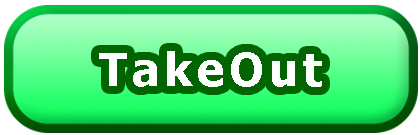
<style>
.page{position:relative;width:420px;height:135px}
.page>*{position:absolute;margin:0}
.t1{font:46px "Tahoma-Bold";letter-spacing:0.1em;color:#ffffff}
</style>
<div class="page">
<p class="t1" style="left:99px;top:51px;width:223px;height:36px">TakeOut</p>
</div>
